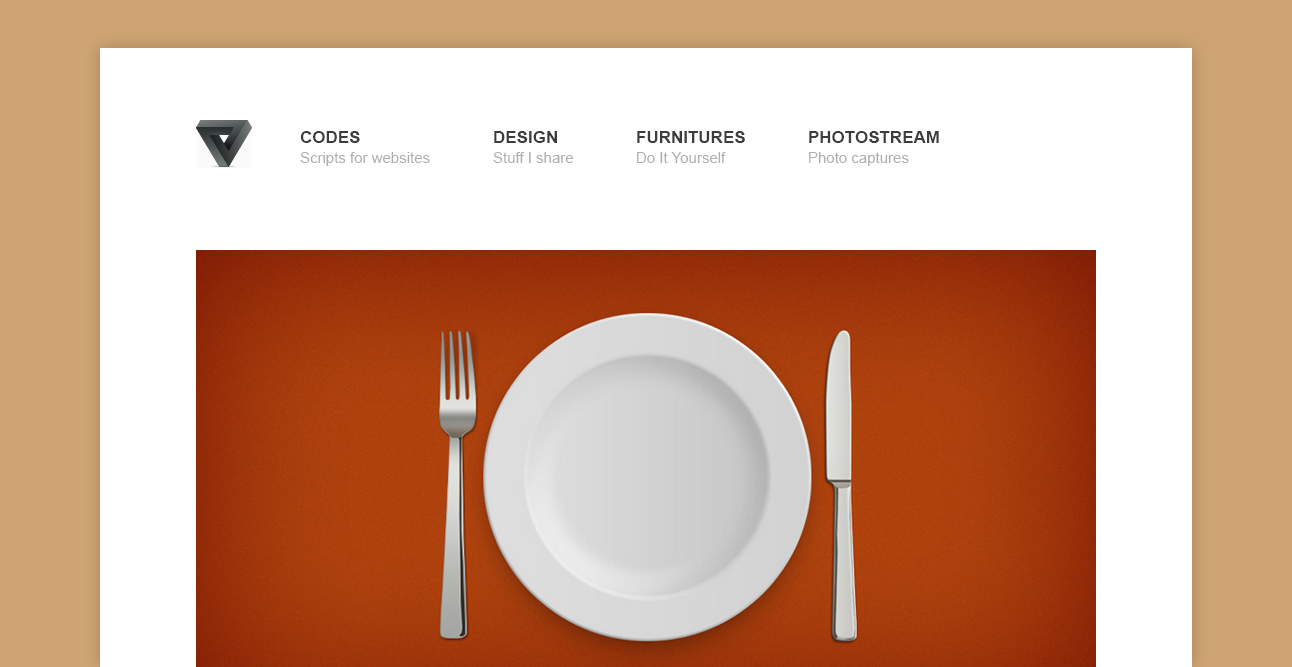
<style>
.page{position:relative;width:1292px;height:667px;background:#ffffff}
.page>*{position:absolute;margin:0}
.t1{font:17px "Arial-BoldMT";color:#3c3c3c}
.t2{font:15px "ArialMT";color:#afafaf}
</style>
<div class="page">
<p class="t1" style="left:300px;top:131px;width:60px;height:12px">CODES</p>
<p class="t1" style="left:494px;top:131px;width:63px;height:12px">DESIGN</p>
<p class="t1" style="left:637px;top:131px;width:108px;height:12px">FURNITURES</p>
<p class="t1" style="left:809px;top:131px;width:130px;height:12px">PHOTOSTREAM</p>
<p class="t2" style="left:300px;top:152px;width:130px;height:14px">Scripts for websites</p>
<p class="t2" style="left:493px;top:152px;width:80px;height:11px">Stuff I share</p>
<p class="t2" style="left:637px;top:152px;width:89px;height:11px">Do It Yourself</p>
<p class="t2" style="left:809px;top:152px;width:100px;height:14px">Photo captures</p>
</div>
